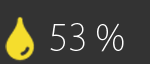
<style>
.page{position:relative;width:150px;height:64px;background:#333333}
.page>*{position:absolute;margin:0}
.t1{font:36px "KozGoPr6N-ExtraLight";color:#ffffff}
</style>
<div class="page">
<p class="t1" style="left:50px;top:23px;width:74px;height:29px">53 %</p>
</div>
